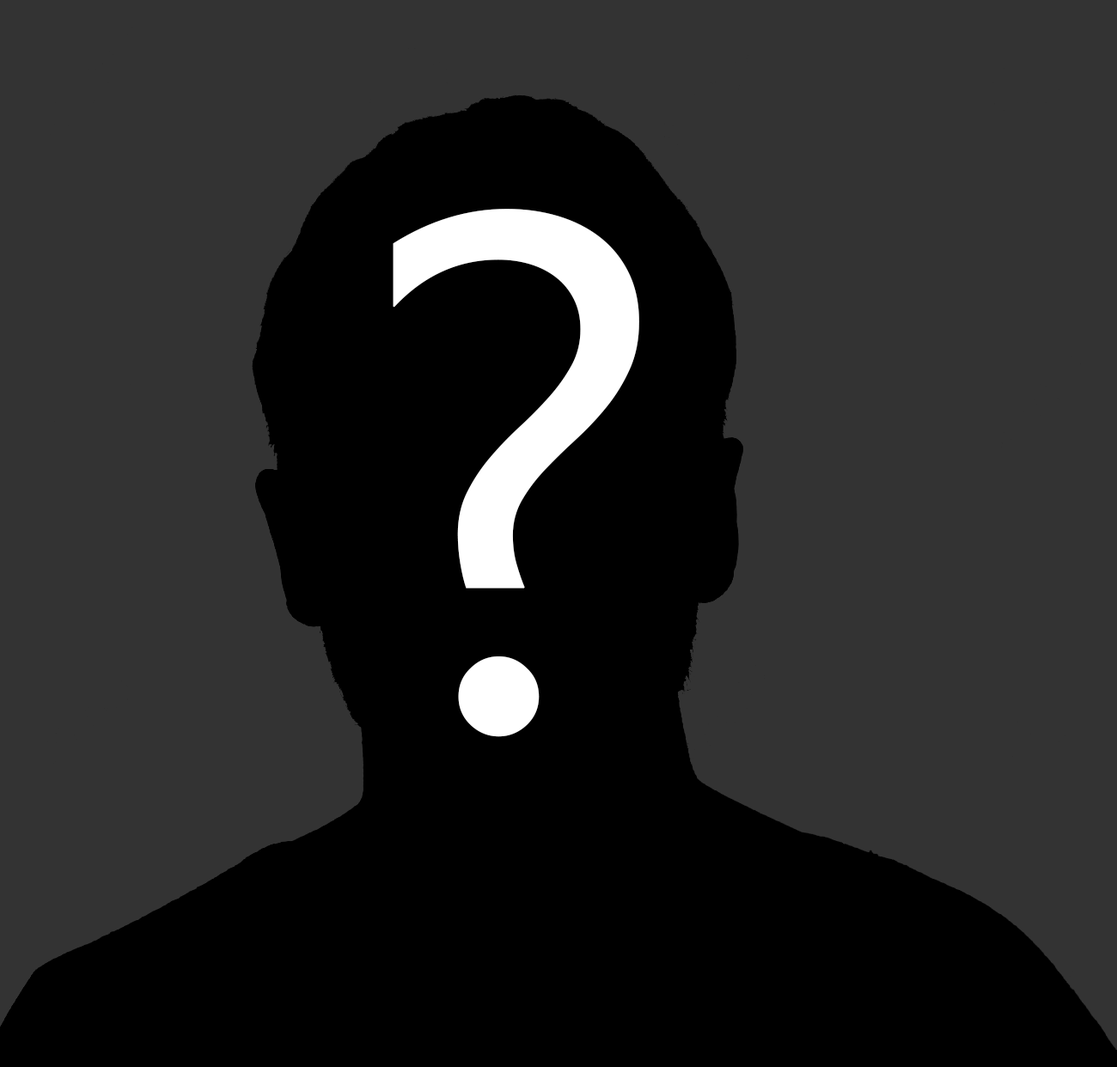
<style>
.page{position:relative;width:1117px;height:1067px;background:#333333}
.page>*{position:absolute;margin:0}
.t1{font:730.4px "Gadugi";letter-spacing:-0.1em;color:#ffffff;font-weight:bold}
</style>
<div class="page">
<p class="t1" style="left:393px;top:209px;width:246px;height:528px">?</p>
</div>
